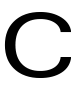
<style>
.page{position:relative;width:71px;height:96px;background:#ffffff}
.page>*{position:absolute;margin:0}
.t1{font:89.4px "MicrosoftSansSerif";color:#010101;scale:1.19 1}
</style>
<div class="page">
<p class="t1" style="left:4px;top:12px;width:68px;height:66px">C</p>
</div>
